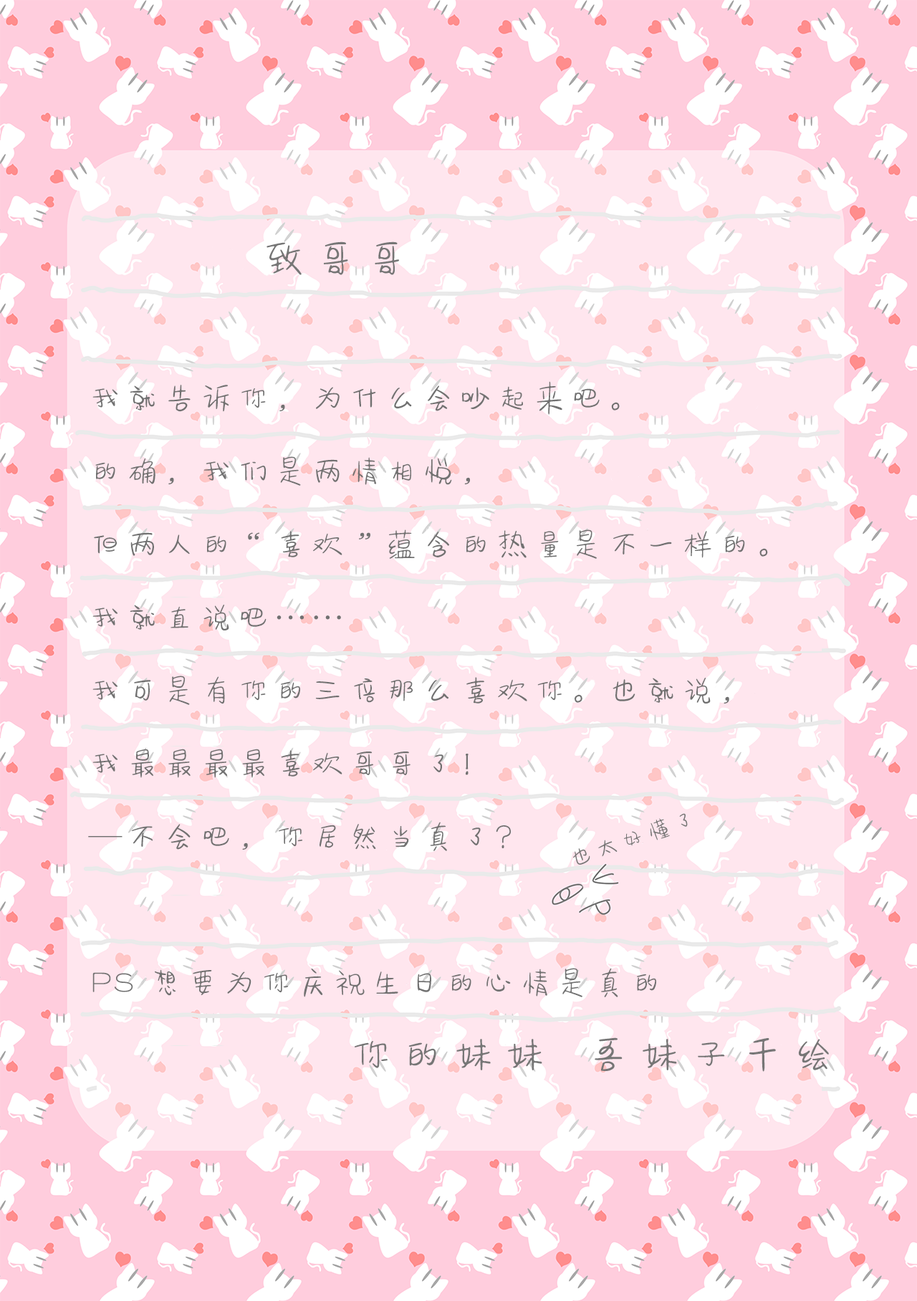
<style>
.page{position:relative;width:917px;height:1301px;background:#ffe6ee}
.page>*{position:absolute;margin:0}
.t1{font:47.1px "FZSEYBJW--GB1-0";letter-spacing:0.09em;color:#767676}
.t2{font:34px/73.1px "FZSEYBJW--GB1-0";letter-spacing:0.09em;color:#717171}
.t3{font:24.9px "FZSEYBJW--GB1-0";letter-spacing:0.09em;color:#767676}
</style>
<div class="page">
<p class="t1" style="left:266px;top:241px;width:133px;height:34px">致哥哥</p>
<p class="t2" style="left:88px;top:381px;width:680px;height:616px">我就告诉你，为什么会吵起来吧。<br>的确，我们是两情相悦，<br>但两人的“喜欢”蕴含的热量是不一样的。<br>我就直说吧……<br>我可是有你的三倍那么喜欢你。也就说，<br>我最最最最喜欢哥哥了！<br>—不会吧，你居然当真了？<br><br>PS 想要为你庆祝生日的心情是真的</p>
<p class="t3" style="left:573px;top:813px;width:115px;height:51px;rotate:-19deg">也太好懂了</p>
<p class="t1" style="left:355px;top:1037px;width:474px;height:34px">你的妹妹  吾妹子千绘</p>
</div>
